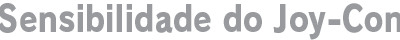
<style>
.page{position:relative;width:400px;height:40px;background:#ffffff}
.page>*{position:absolute;margin:0}
.t1{font:36px "RodinPro-EB";letter-spacing:0.003em;color:#989a9d;scale:0.83 1}
</style>
<div class="page">
<p class="t1" style="left:0px;top:3px;width:402px;height:37px">Sensibilidade do Joy-Con</p>
</div>
